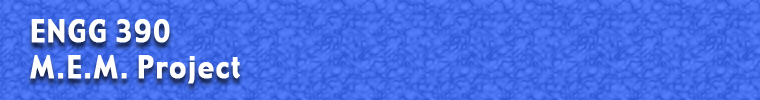
<style>
.page{position:relative;width:760px;height:100px}
.page>*{position:absolute;margin:0}
.t1{font:30px "GadgetRegular";letter-spacing:0.05em;color:#ffffff;font-weight:bold;scale:0.9 1}
</style>
<div class="page">
<p class="t1" style="left:30px;top:19px;width:210px;height:65px">ENGG 390<br>M.E.M. Project</p>
</div>
